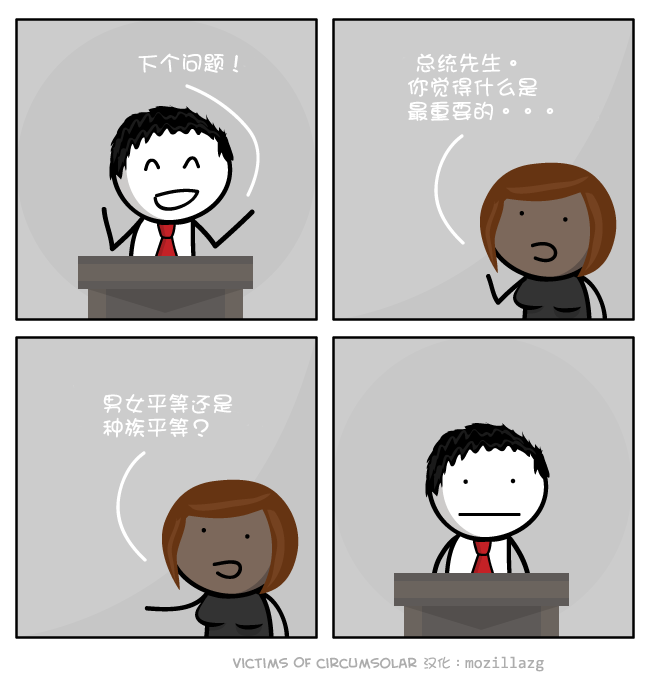
<style>
.page{position:relative;width:650px;height:680px;background:#cccccc}
.page>*{position:absolute;margin:0}
.t1{font:22px "DFGirl";color:#ffffff}
.t2{font:22px/24px "DFGirl";color:#ffffff}
</style>
<div class="page">
<p class="t1" style="left:138px;top:53px;width:101px;height:20px">下个问题！</p>
<p class="t2" style="left:407px;top:53px;width:147px;height:68px">总统先生。<br>   你觉得什么是<br>   最重要的。。。</p>
<p class="t2" style="left:103px;top:394px;width:130px;height:44px">男女平等还是<br>种族平等？</p>
</div>
